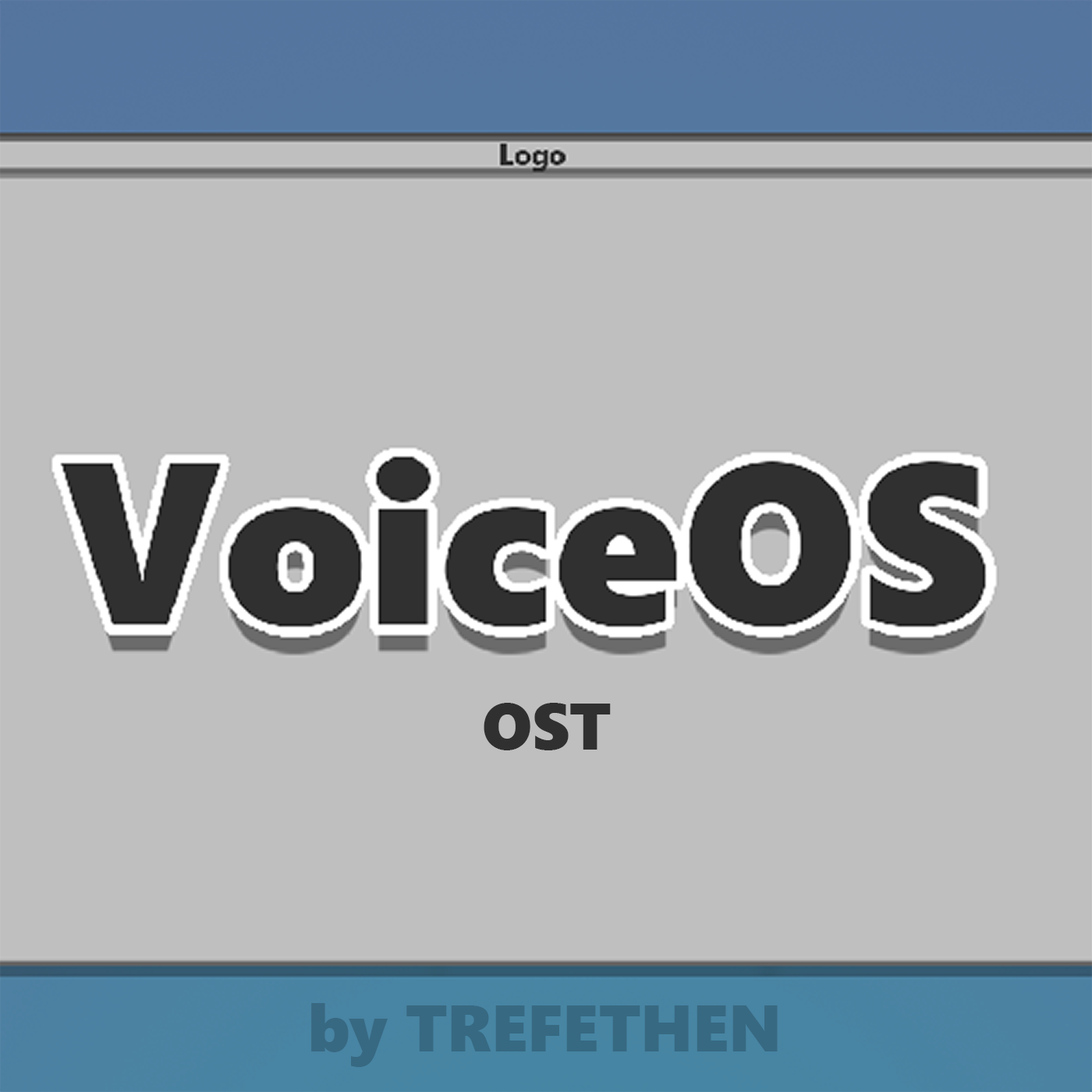
<style>
.page{position:relative;width:1092px;height:1092px;background:#bfbfbf}
.page>*{position:absolute;margin:0}
.t1{font:65.3px "SegoeUIBlack";color:#303030}
.t2{font:65.3px "SegoeUIBlack";color:#376982}
</style>
<div class="page">
<p class="t1" style="left:484px;top:703px;width:127px;height:47px">OST</p>
<p class="t2" style="left:311px;top:1003px;width:467px;height:64px">by TREFETHEN</p>
</div>
